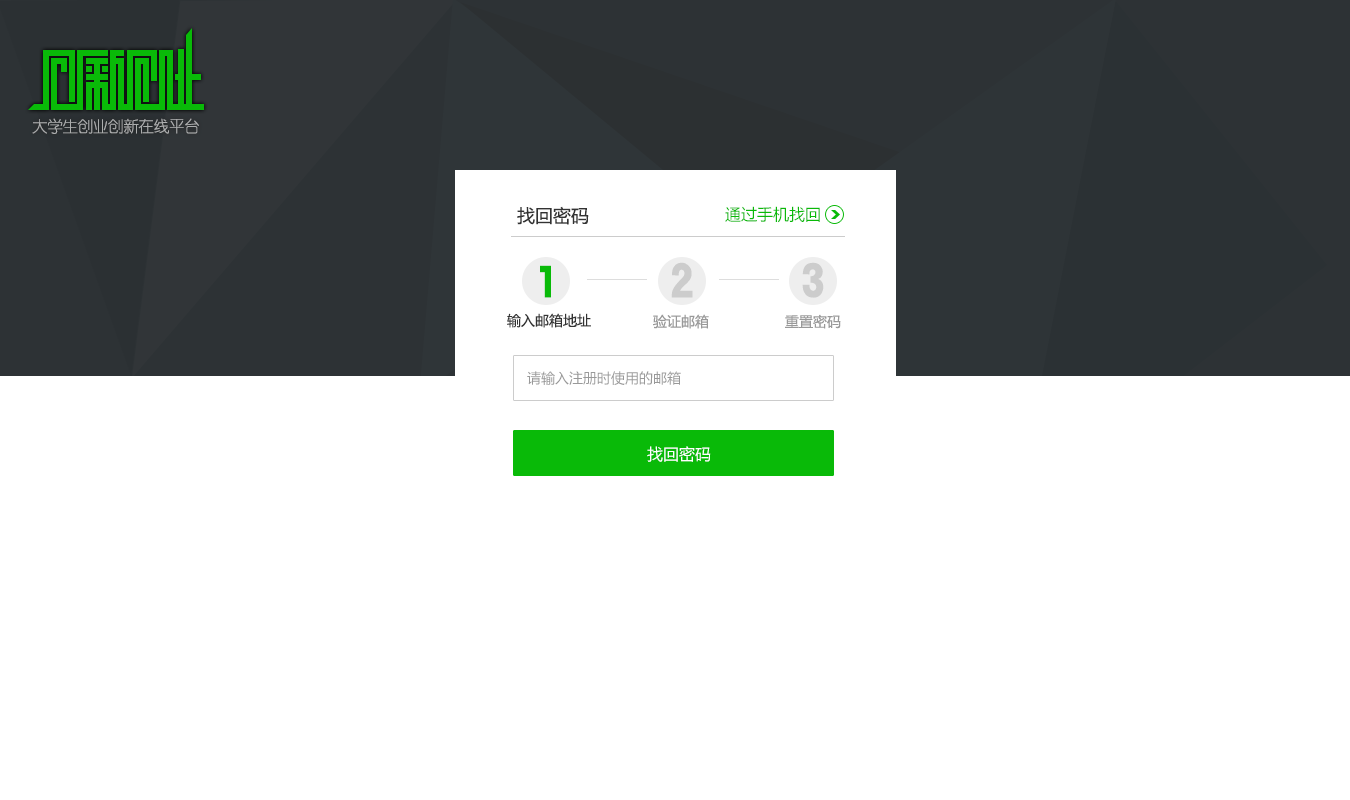
<style>
.page{position:relative;width:1350px;height:800px;background:#ffffff}
.page>*{position:absolute;margin:0}
.t1{font:16px "YouYuan";letter-spacing:-0.05em;color:#abadad}
.t2{font:18px "MicrosoftYaHei";color:#333333}
.t3{font:16px "MicrosoftYaHei";color:#09ba08}
.t4{font:50px "HYk1gj";color:#09ba08}
.t5{font:50px "HYb9gf";color:#cccccc}
.t6{font:14px "MicrosoftYaHei";color:#333333}
.t7{font:14px "MicrosoftYaHei";color:#999999}
.t8{font:16px "MicrosoftYaHei";color:#ffffff}
</style>
<div class="page">
<p class="t1" style="left:32px;top:118px;width:167px;height:16px">大学生创业创新在线平台</p>
<p class="t2" style="left:517px;top:206px;width:72px;height:19px">找回密码</p>
<p class="t3" style="left:725px;top:206px;width:95px;height:17px">通过手机找回</p>
<p class="t4" style="left:540px;top:265px;width:11px;height:33px">1</p>
<p class="t5" style="left:671px;top:262px;width:22px;height:36px">2</p>
<p class="t5" style="left:802px;top:262px;width:22px;height:36px">3</p>
<p class="t6" style="left:507px;top:313px;width:84px;height:15px">输入邮箱地址</p>
<p class="t7" style="left:653px;top:314px;width:56px;height:15px">验证邮箱</p>
<p class="t7" style="left:785px;top:314px;width:56px;height:15px">重置密码</p>
<p class="t7" style="left:527px;top:371px;width:154px;height:14px">请输入注册时使用的邮箱</p>
<p class="t8" style="left:647px;top:446px;width:64px;height:16px">找回密码</p>
</div>
